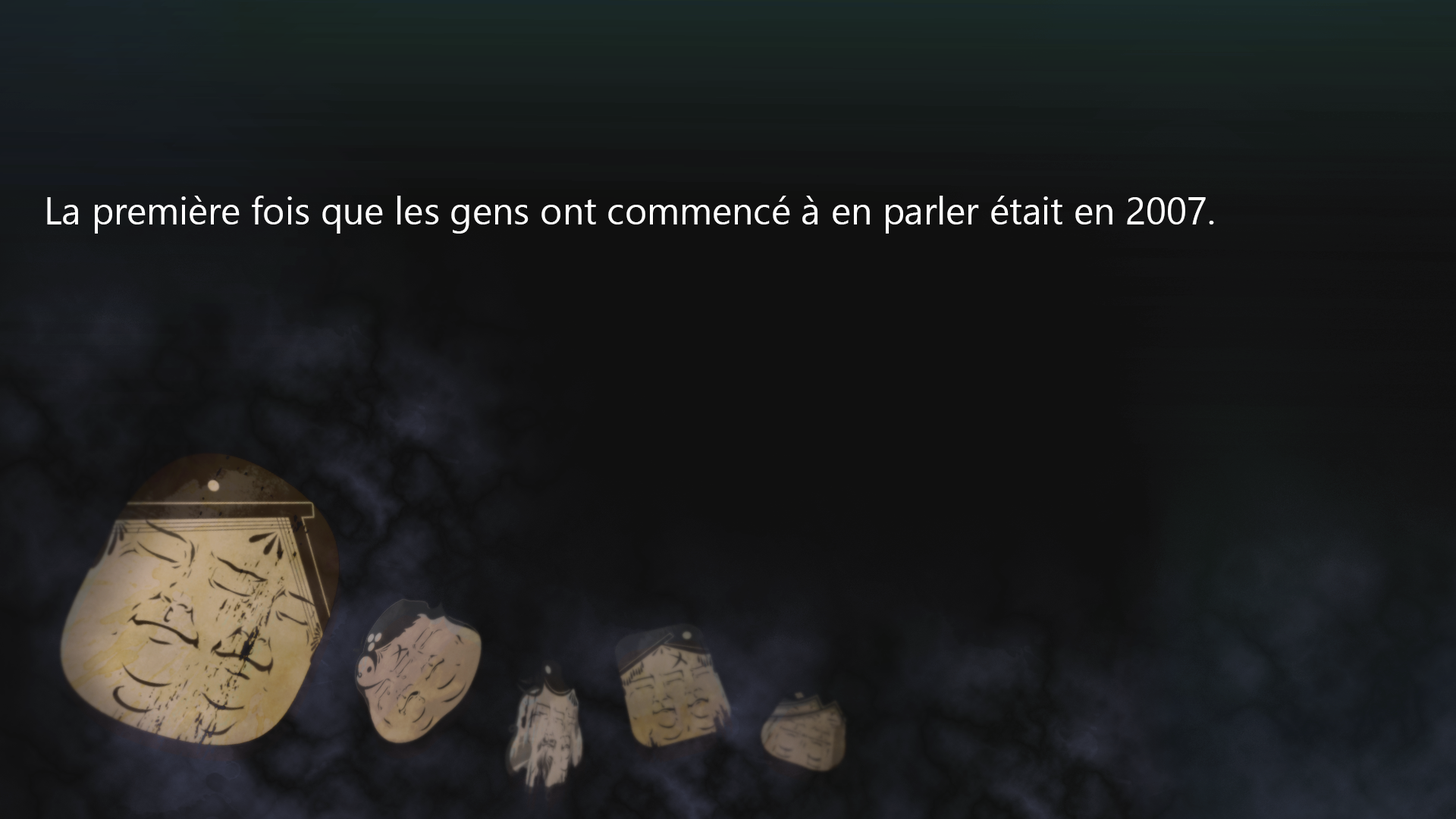
<style>
.page{position:relative;width:1456px;height:819px}
.page>*{position:absolute;margin:0}
.t1{font:37.9px "SegoeUIHistoric";color:#ffffff}
</style>
<div class="page">
<p class="t1" style="left:47px;top:196px;width:1167px;height:38px">La première fois que les gens ont commencé à en parler était en 2007.</p>
</div>
